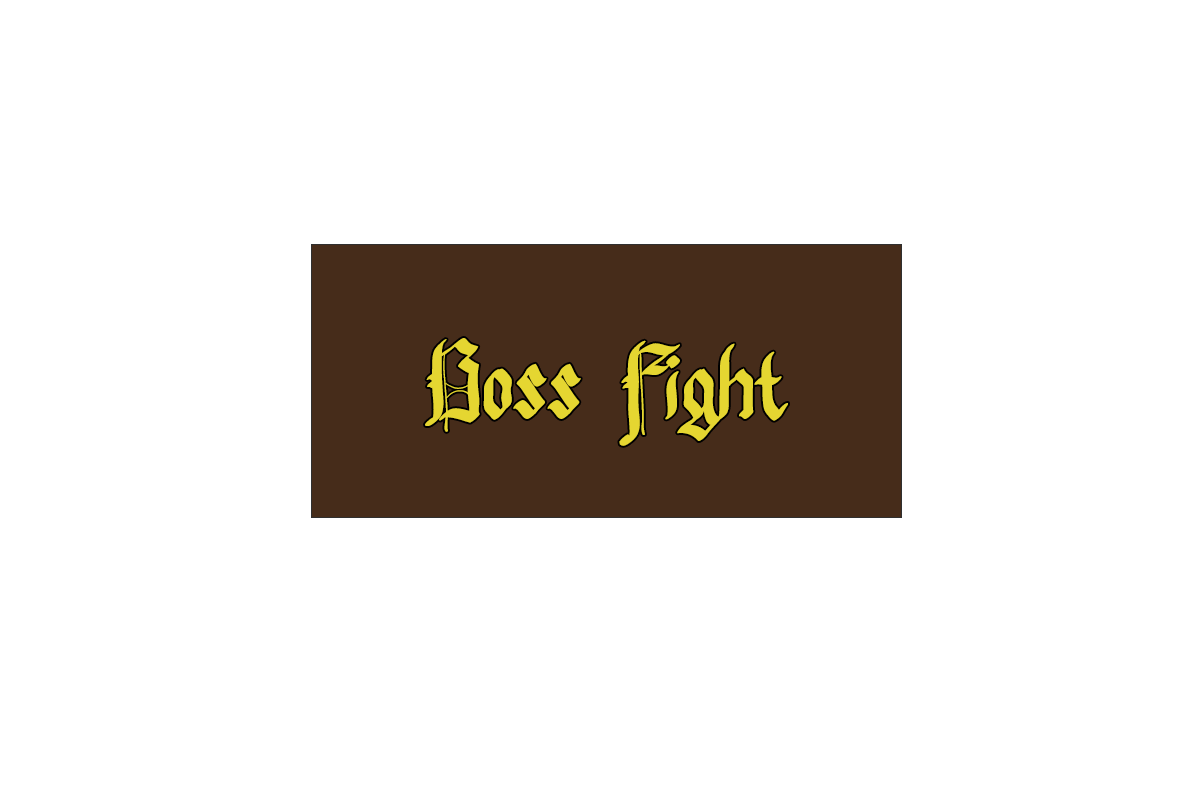
<style>
.page{position:relative;width:1200px;height:800px;background:#ffffff}
.page>*{position:absolute;margin:0}
.t1{font:100px "Pennybridge1563";color:#e5d631}
</style>
<div class="page">
<p class="t1" style="left:425px;top:338px;width:363px;height:108px">Boss Fight</p>
</div>
